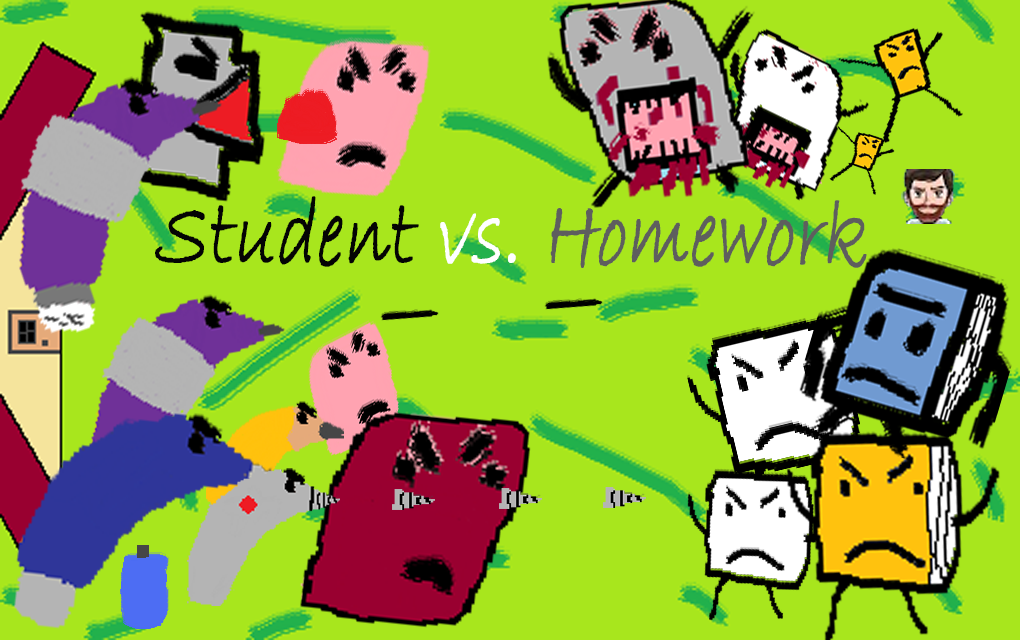
<style>
.page{position:relative;width:1020px;height:640px;background:#a8e61d}
.page>*{position:absolute;margin:0}
.t1{font:98.2px "BradleyHandITC";color:#5e5e5e;font-weight:bold;font-style:italic;scale:0.71 1}
.t2{font:98.2px "BradleyHandITC";color:#040404;font-weight:bold;font-style:italic;scale:0.71 1}
.t3{font:98.2px "BradleyHandITC";color:#ffffff;font-weight:bold;font-style:italic;scale:0.71 1}
</style>
<div class="page">
<p class="t1" style="left:155px;top:196px;width:712px;height:72px"><span class="t2">Student </span><span class="t3">vs. </span>Homework</p>
</div>
